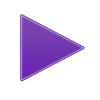
<style>
.page{position:relative;width:100px;height:100px;background:#ffffff}
.page>*{position:absolute;margin:0}
.t1{font:168px "Menlo-Regular";color:#7c48b0;scale:0.62 1}
</style>
<div class="page">
<p class="t1" style="left:21px;top:15px;width:63px;height:66px">►</p>
</div>
